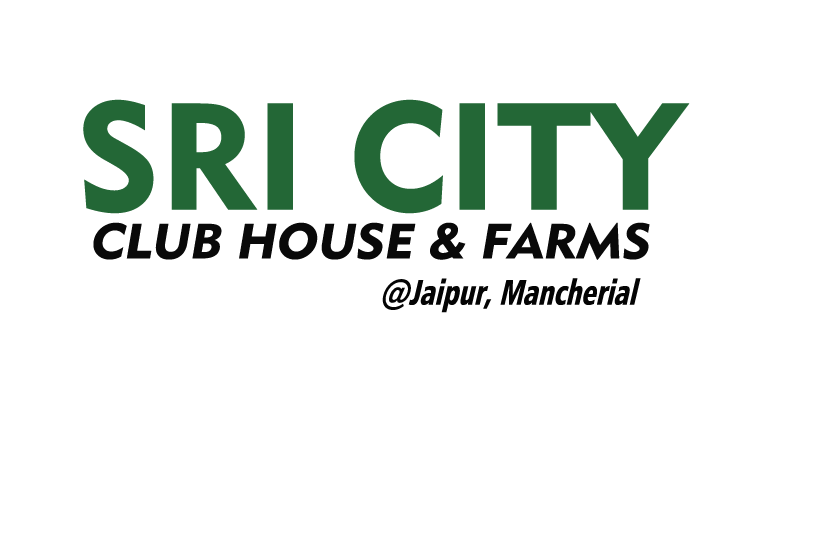
<style>
.page{position:relative;width:825px;height:550px;background:#ffffff}
.page>*{position:absolute;margin:0}
.t1{font:150px "Geometric415BT-BlackA";color:#236736}
.t2{font:49.3px "Geometric415BT-BlackA";color:#090909;scale:1.05 1}
.t3{font:36.1px "Humanist777BT-BlackCondensedB";color:#040404;scale:0.79 1}
</style>
<div class="page">
<p class="t1" style="left:83px;top:99px;width:607px;height:115px">SRI CITY</p>
<p class="t2" style="left:93px;top:222px;width:557px;height:38px">CLUB HOUSE &amp; FARMS</p>
<p class="t3" style="left:382px;top:278px;width:259px;height:35px">@Jaipur, Mancherial</p>
</div>
